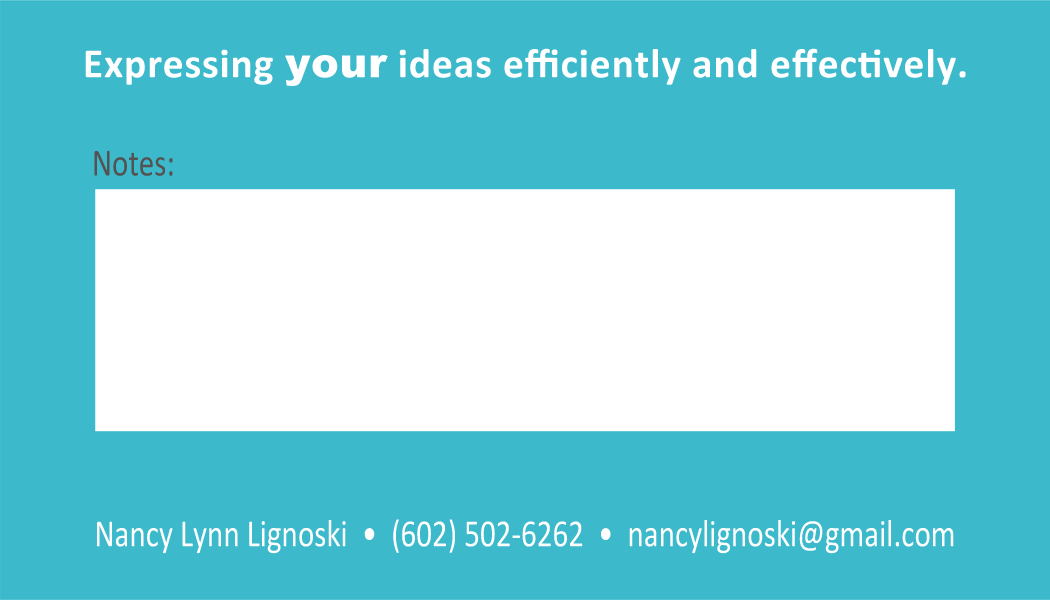
<style>
.page{position:relative;width:1050px;height:600px;background:#3cb9cb}
.page>*{position:absolute;margin:0}
.t1{font:41.7px "Calibri-Bold";letter-spacing:0.02em;color:#ffffff}
.t2{font:41.7px "Arial-Black";letter-spacing:0.02em;color:#ffffff}
.t3{font:38.8px "Calibri";color:#545252;scale:0.8 1}
.t4{font:38.8px "Calibri";color:#ffffff;scale:0.8 1}
</style>
<div class="page">
<p class="t1" style="left:85px;top:48px;width:881px;height:38px">Expressing <span class="t2">your</span> ideas efficiently and effectively.</p>
<p class="t3" style="left:94px;top:151px;width:79px;height:25px">Notes:</p>
<p class="t4" style="left:97px;top:519px;width:857px;height:35px">Nancy Lynn Lignoski  •  (602) 502-6262  •  nancylignoski@gmail.com</p>
</div>
